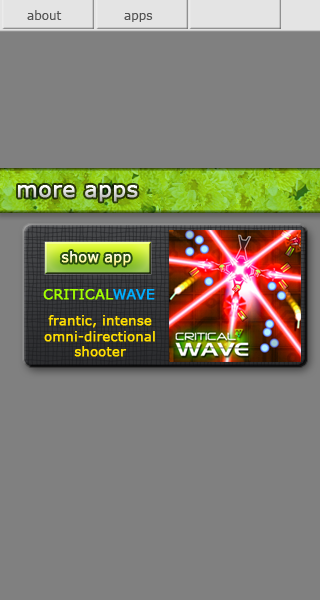
<style>
.page{position:relative;width:320px;height:600px;background:#808080}
.page>*{position:absolute;margin:0}
.t1{font:12px "Verdana";color:#545454}
.t2{font:22px "Verdana";font-weight:bold}
.t3{font:14px "Verdana";font-weight:bold}
.t4{font:14px "Verdana";color:#a2ff00;font-weight:bold}
.t5{font:14px "Verdana";color:#01aeff;font-weight:bold}
.t6{font:13px "Verdana";color:#ffde01;font-weight:bold}
</style>
<div class="page">
<p class="t1" style="left:27px;top:10px;width:35px;height:10px">about</p>
<p class="t1" style="left:124px;top:13px;width:29px;height:9px">apps</p>
<p class="t2" style="left:18px;top:185px;width:120px;height:17px">more apps</p>
<p class="t3" style="left:61px;top:251px;width:70px;height:15px">show app</p>
<p class="t4" style="left:43px;top:289px;width:112px;height:11px">CRITICAL<span class="t5">WAVE</span></p>
<p class="t6" style="left:44px;top:315px;width:111px;height:42px;text-align:center">frantic, intense<br>omni-directional<br>shooter</p>
</div>
